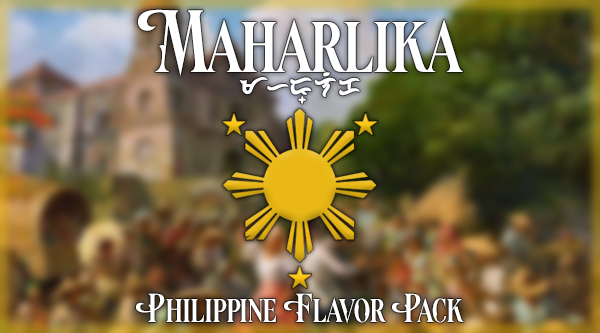
<style>
.page{position:relative;width:600px;height:333px}
.page>*{position:absolute;margin:0}
.t1{font:100px "ParadoxVictorian-Condensed";color:#ffffff}
.t2{font:24.9px "BAYBAYINSISIL";color:#ffffff}
.t3{font:45.8px "ParadoxVictorian-Condensed";color:#ffffff}
</style>
<div class="page">
<p class="t1" style="left:138px;top:9px;width:325px;height:67px">Maharlika</p>
<p class="t2" style="left:239px;top:72px;width:121px;height:32px">mhr+lik</p>
<p class="t3" style="left:136px;top:293px;width:328px;height:31px">Philippine Flavor Pack</p>
</div>
